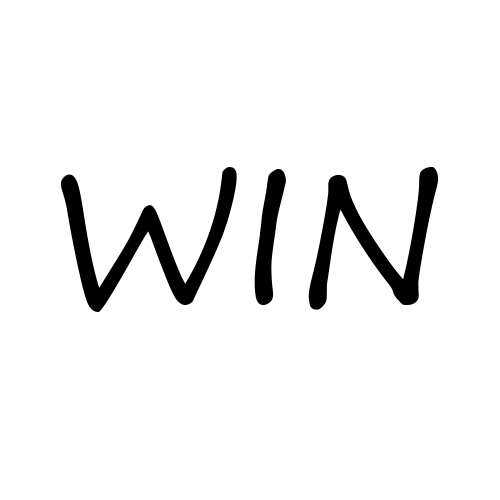
<style>
.page{position:relative;width:500px;height:500px;background:#ffffff}
.page>*{position:absolute;margin:0}
.t1{font:186.1px "SegoePrint";color:#000000}
</style>
<div class="page">
<p class="t1" style="left:60px;top:167px;width:379px;height:145px">WIN</p>
</div>
